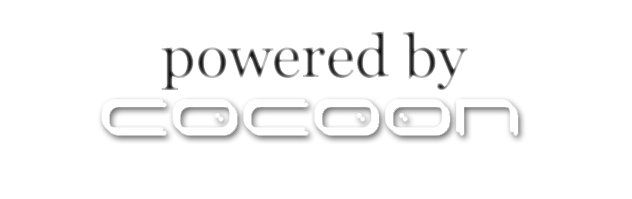
<style>
.page{position:relative;width:632px;height:199px;background:#ffffff}
.page>*{position:absolute;margin:0}
.t1{font:60px "Georgia"}
</style>
<div class="page">
<p class="t1" style="left:161px;top:31px;width:307px;height:59px">powered by</p>
</div>
